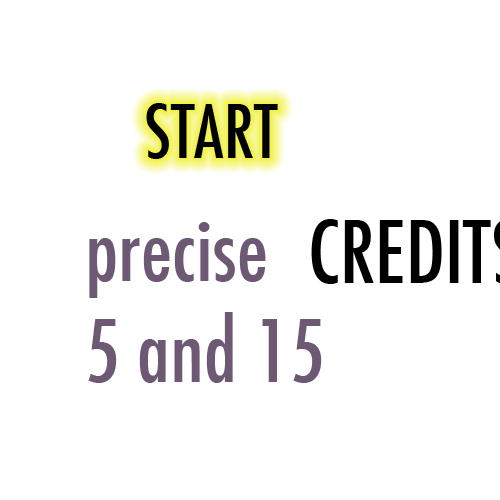
<style>
.page{position:relative;width:500px;height:500px;background:#ffffff}
.page>*{position:absolute;margin:0}
.t1{font:72px "Futura-CondensedMedium";color:#000000}
.t2{font:84px "Futura-CondensedMedium";color:#6d5974}
</style>
<div class="page">
<p class="t1" style="left:146px;top:103px;width:132px;height:56px">START</p>
<p class="t2" style="left:88px;top:222px;width:234px;height:161px">precise<br>5 and 15</p>
</div>
